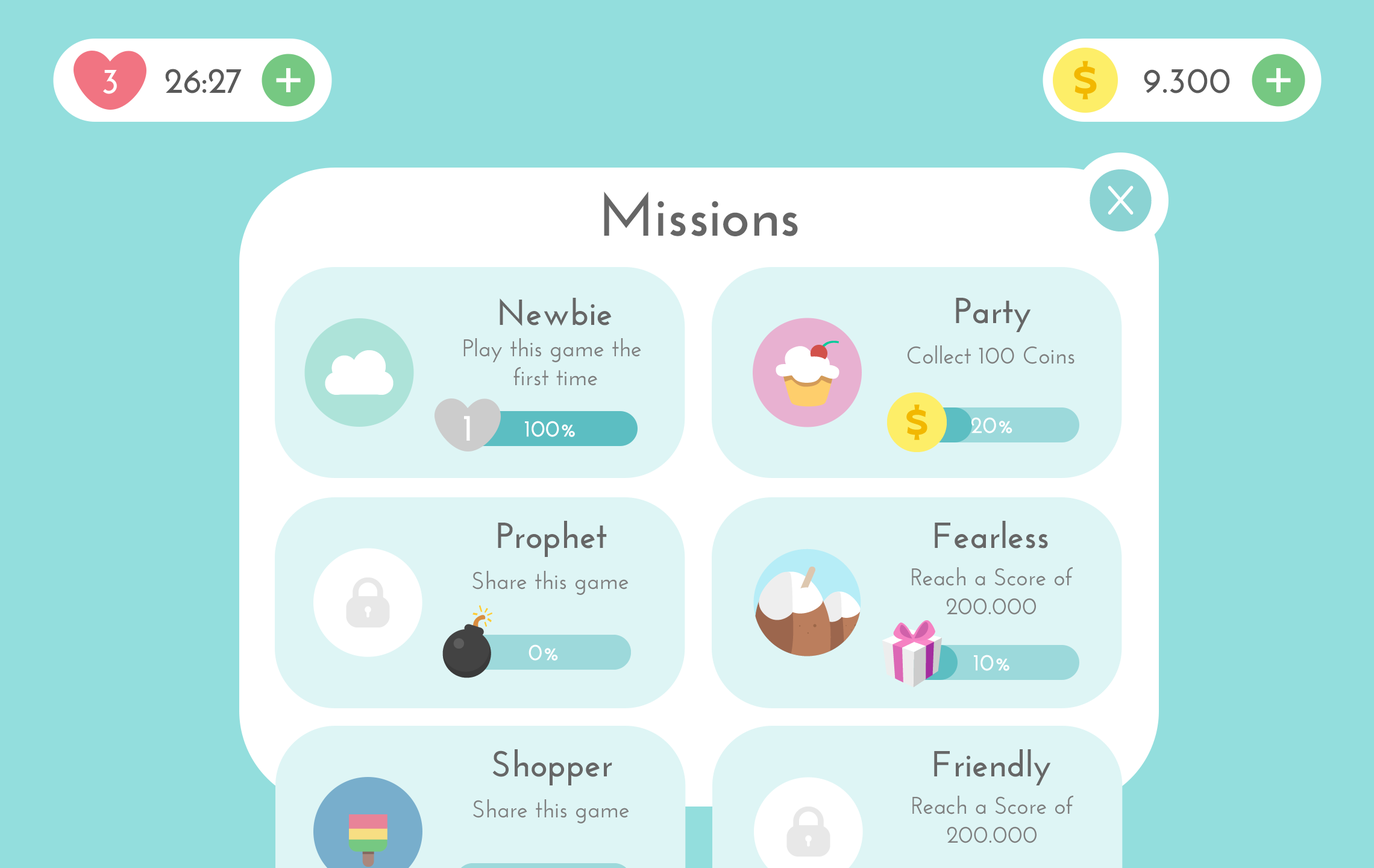
<style>
.page{position:relative;width:1374px;height:868px;background:#93dedd}
.page>*{position:absolute;margin:0}
.t1{font:36.2px "JosefinSans-Bold";color:#ffffff}
.t2{font:36.2px "JosefinSans-Bold";color:#595959}
.t3{font:60.3px "JosefinSans-Bold";color:#666666}
.t4{font:36.2px "JosefinSans-Bold";color:#666666}
.t5{font:24.1px/28.9px "JosefinSans-SemiBold";color:#7e7e7e}
.t6{font:24.1px "JosefinSans-SemiBold";color:#7e7e7e}
.t7{font:37.9px "JosefinSans-Bold";color:#ffffff}
.t8{font:22.9px "JosefinSans-SemiBold";color:#ffffff;font-weight:bold}
</style>
<div class="page">
<p class="t1" style="left:103px;top:70px;width:14px;height:24px">3</p>
<p class="t2" style="left:165px;top:69px;width:77px;height:24px">26:27</p>
<p class="t2" style="left:1144px;top:69px;width:86px;height:24px">9.300</p>
<p class="t3" style="left:604px;top:191px;width:194px;height:45px">Missions</p>
<p class="t4" style="left:500px;top:298px;width:112px;height:28px">Newbie</p>
<p class="t4" style="left:956px;top:298px;width:75px;height:34px">Party</p>
<p class="t5" style="left:463px;top:338px;width:178px;height:48px;text-align:center">Play this game the <br>first time</p>
<p class="t6" style="left:908px;top:345px;width:167px;height:19px">Collect 100 Coins</p>
<p class="t7" style="left:464px;top:416px;width:6px;height:25px">1</p>
<p class="t8" style="left:525px;top:421px;width:50px;height:16px">100%</p>
<p class="t8" style="left:971px;top:417px;width:41px;height:16px">20%</p>
<p class="t4" style="left:498px;top:521px;width:109px;height:36px">Prophet</p>
<p class="t4" style="left:935px;top:521px;width:113px;height:27px">Fearless</p>
<p class="t5" style="left:912px;top:567px;width:161px;height:48px;text-align:center">Reach a Score of<br>200.000</p>
<p class="t6" style="left:472px;top:571px;width:157px;height:24px">Share this game</p>
<p class="t8" style="left:974px;top:654px;width:35px;height:17px">10%</p>
<p class="t4" style="left:492px;top:749px;width:120px;height:36px">Shopper</p>
<p class="t4" style="left:934px;top:749px;width:117px;height:36px">Friendly</p>
<p class="t5" style="left:912px;top:796px;width:161px;height:47px;text-align:center">Reach a Score of<br>200.000</p>
<p class="t6" style="left:473px;top:799px;width:156px;height:24px">Share this game</p>
</div>
